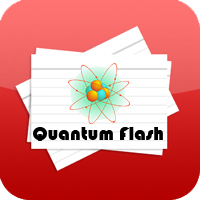
<style>
.page{position:relative;width:200px;height:200px}
.page>*{position:absolute;margin:0}
.t1{font:20px "Bauhaus93";color:#000000}
</style>
<div class="page">
<p class="t1" style="left:33px;top:127px;width:130px;height:14px">Quantum Flash</p>
</div>
